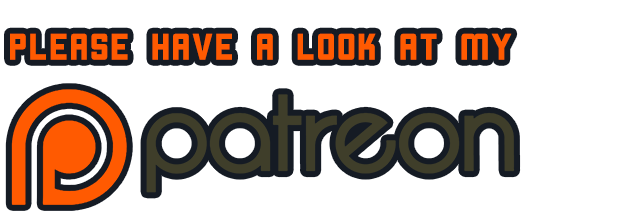
<style>
.page{position:relative;width:620px;height:213px;background:#ffffff}
.page>*{position:absolute;margin:0}
.t1{font:36px "Cornerstone";letter-spacing:-0.01em;color:#ff5a01}
</style>
<div class="page">
<p class="t1" style="left:10px;top:33px;width:502px;height:27px">Please have a look at my</p>
</div>
